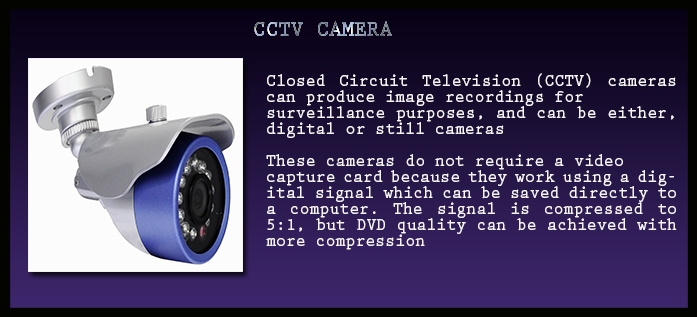
<style>
.page{position:relative;width:697px;height:317px}
.page>*{position:absolute;margin:0}
.t1{font:22.4px "PrestigeEliteStd-Bd";letter-spacing:0.002em;scale:0.94 1}
.t2{font:17.6px/16px "PrestigeEliteStd-Bd";letter-spacing:0.002em;color:#f6f4f9;scale:0.94 1}
</style>
<div class="page">
<p class="t1" style="left:254px;top:21px;width:138px;height:15px">CCTV CAMERA</p>
<p class="t2" style="left:266px;top:73px;width:411px;height:177px;text-align:justify">Closed Circuit Television (CCTV) cameras can produce image recordings for <br>surveillance purposes, and can be either, digital or still cameras<br><br>These cameras do not require a video <br>capture card because they work using a digital signal which can be saved directly to a computer. The signal is compressed to 5:1, but DVD quality can be achieved with more compression</p>
</div>
